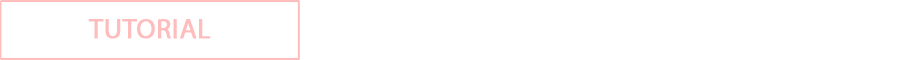
<style>
.page{position:relative;width:900px;height:60px;background:#ffffff}
.page>*{position:absolute;margin:0}
.t1{font:27.8px "MyriadPro-Regular";color:#ffbcbc;font-weight:bold}
</style>
<div class="page">
<p class="t1" style="left:88px;top:19px;width:123px;height:20px">TUTORIAL</p>
</div>
